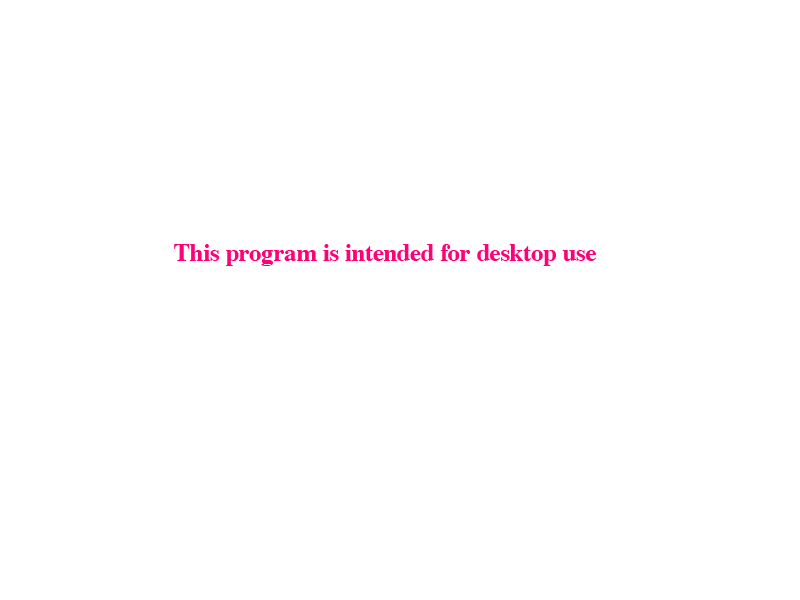
<style>
.page{position:relative;width:800px;height:600px;background:#ffffff}
.page>*{position:absolute;margin:0}
.t1{font:25px "Times-Bold";letter-spacing:-0.01em;color:#ff0078}
</style>
<div class="page">
<p class="t1" style="left:174px;top:244px;width:422px;height:22px">This program is intended for desktop use</p>
</div>
